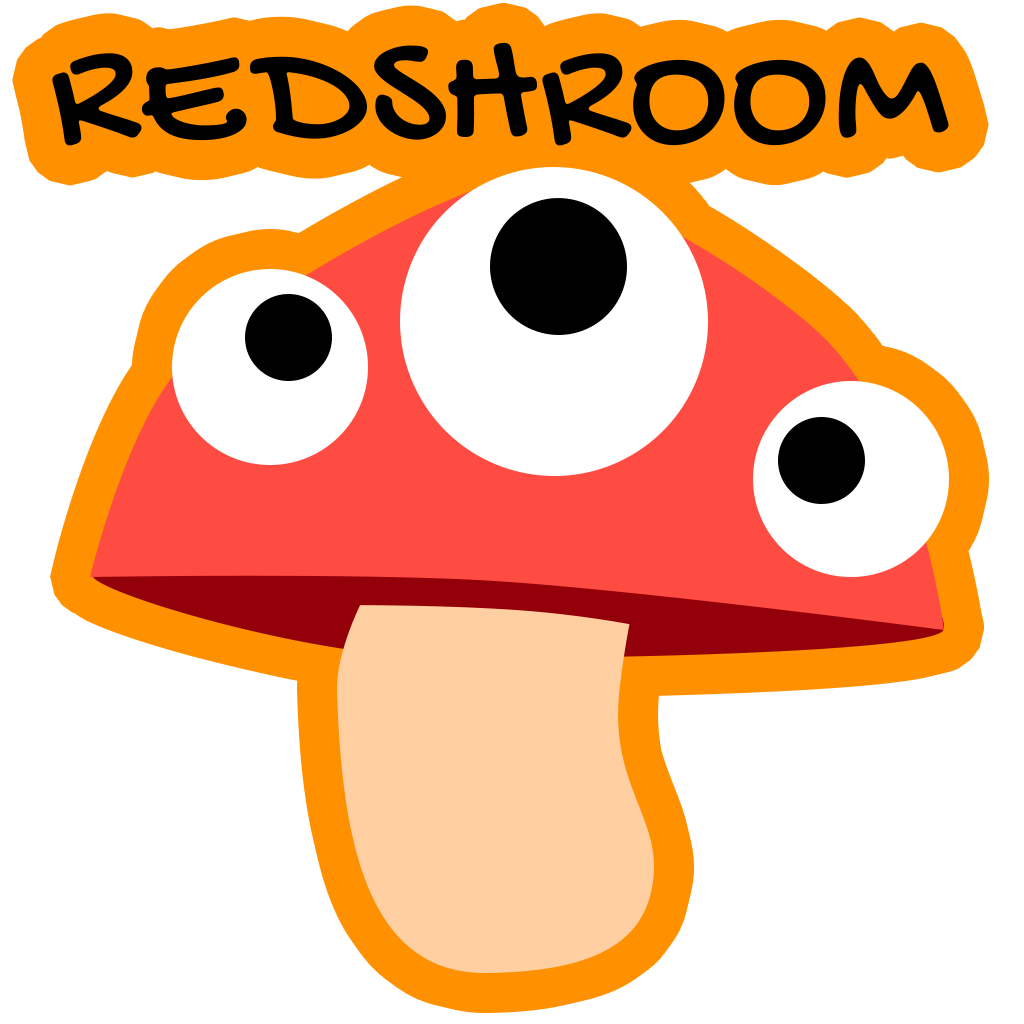
<style>
.page{position:relative;width:1024px;height:1024px;background:#ffffff}
.page>*{position:absolute;margin:0}
.t1{font:164.6px "GochiHandCyrillic";color:#000000}
</style>
<div class="page">
<p class="t1" style="left:52px;top:42px;width:897px;height:104px">REDSHROOM</p>
</div>
